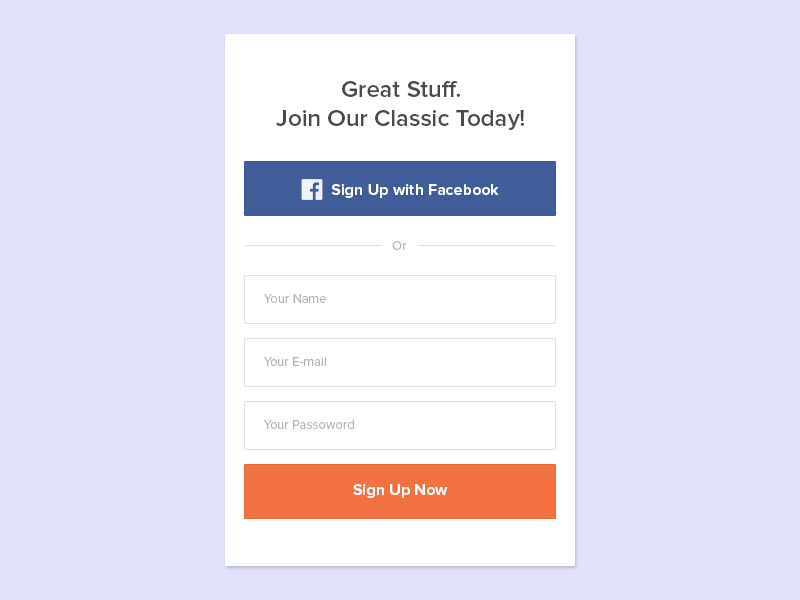
<style>
.page{position:relative;width:800px;height:600px;background:#e3e2fd}
.page>*{position:absolute;margin:0}
.t1{font:24px "ProximaNova-Semibold";color:#4a4a4a}
.t2{font:16px "ProximaNova-Bold";color:#ffffff}
.t3{font:13px "ProximaNova-Regular";color:#b5b5b5}
</style>
<div class="page">
<p class="t1" style="left:276px;top:81px;width:248px;height:49px;text-align:center">Great Stuff.<br>Join Our Classic Today!</p>
<p class="t2" style="left:331px;top:184px;width:168px;height:14px">Sign Up with Facebook</p>
<p class="t3" style="left:392px;top:241px;width:15px;height:9px">Or</p>
<p class="t3" style="left:264px;top:294px;width:62px;height:9px">Your Name</p>
<p class="t3" style="left:264px;top:357px;width:62px;height:9px">Your E-mail</p>
<p class="t3" style="left:264px;top:419px;width:90px;height:10px">Your Passoword</p>
<p class="t2" style="left:353px;top:484px;width:95px;height:14px">Sign Up Now</p>
</div>
